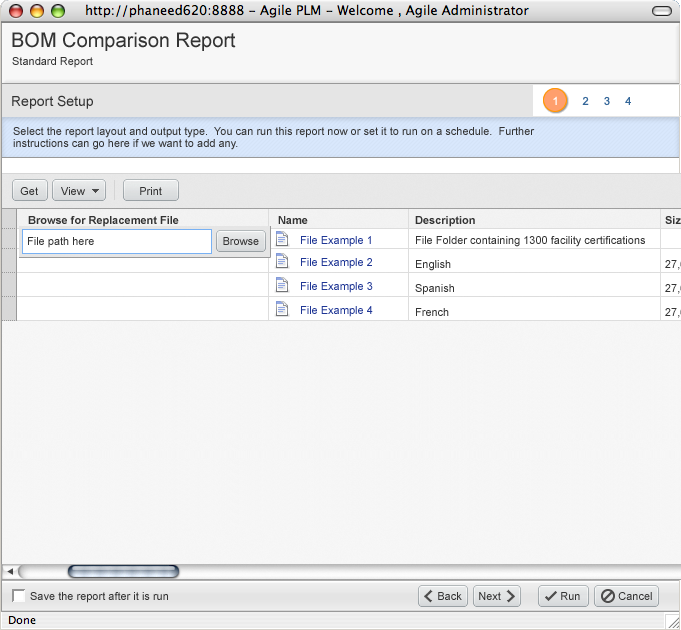
<style>
.page{position:relative;width:681px;height:630px;background:#f6f6f6}
.page>*{position:absolute;margin:0}
.t1{font:20px "ArialMT";color:#333333}
.t2{font:11px "ArialMT";color:#333333}
.t3{font:14px "ArialMT";color:#333333}
.t4{font:11px "ArialMT";color:#ffffff}
.t5{font:11px "ArialMT";color:#336699}
.t6{font:11px/12px "ArialMT";color:#333333}
.t7{font:11px "Arial-BoldMT";color:#333333}
.t8{font:11px/20px "ArialMT";color:#333333}
.t9{font:11px/20px "Arial-BoldMT";color:#333333}
.t10{font:11px/24px "ArialMT";color:#333333}
.t11{font:11px "ArialMT";color:#1f3695}
.t12{font:11px/24px "ArialMT";color:#1f3695}
.t13{font:11px/20px "ArialMT";color:#1f3695}
</style>
<div class="page">
<p class="t1" style="left:12px;top:32px;width:224px;height:19px">BOM Comparison Report</p>
<p class="t2" style="left:12px;top:57px;width:81px;height:11px">Standard Report</p>
<p class="t3" style="left:12px;top:95px;width:81px;height:14px">Report Setup</p>
<p class="t4" style="left:553px;top:96px;width:4px;height:9px">1</p>
<p class="t5" style="left:582px;top:96px;width:49px;height:10px">2     3     4</p>
<p class="t6" style="left:13px;top:127px;width:522px;height:23px">Select the report layout and output type.  You can run this report now or set it to run on a schedule.  Further<br>instructions can go here if we want to add any.</p>
<p class="t2" style="left:20px;top:187px;width:18px;height:8px">Get</p>
<p class="t2" style="left:61px;top:187px;width:24px;height:8px">View</p>
<p class="t2" style="left:140px;top:187px;width:22px;height:8px">Print</p>
<p class="t7" style="left:28px;top:216px;width:151px;height:11px">Browse for Replacement File</p>
<p class="t7" style="left:278px;top:216px;width:30px;height:8px">Name</p>
<p class="t8" style="left:415px;top:216px;width:230px;height:100px"><span class="t9">Description<br></span>File Folder containing 1300 facility certifications<br><span class="t10">English <br>Spanish<br>French</span></p>
<p class="t2" style="left:28px;top:237px;width:66px;height:11px">File path here</p>
<p class="t2" style="left:223px;top:237px;width:36px;height:8px">Browse</p>
<p class="t11" style="left:301px;top:236px;width:70px;height:11px"><span class="t7"><br></span>File Example 1</p>
<p class="t12" style="left:301px;top:258px;width:72px;height:59px"><span class="t13">File Example 2<br></span>File Example 3<br>File Example 4</p>
<p class="t2" style="left:30px;top:592px;width:138px;height:11px">Save the report after it is run</p>
<p class="t2" style="left:438px;top:592px;width:24px;height:8px">Back</p>
<p class="t2" style="left:479px;top:592px;width:22px;height:8px">Next</p>
<p class="t2" style="left:561px;top:592px;width:19px;height:8px">Run</p>
<p class="t2" style="left:618px;top:592px;width:34px;height:8px">Cancel</p>
</div>
